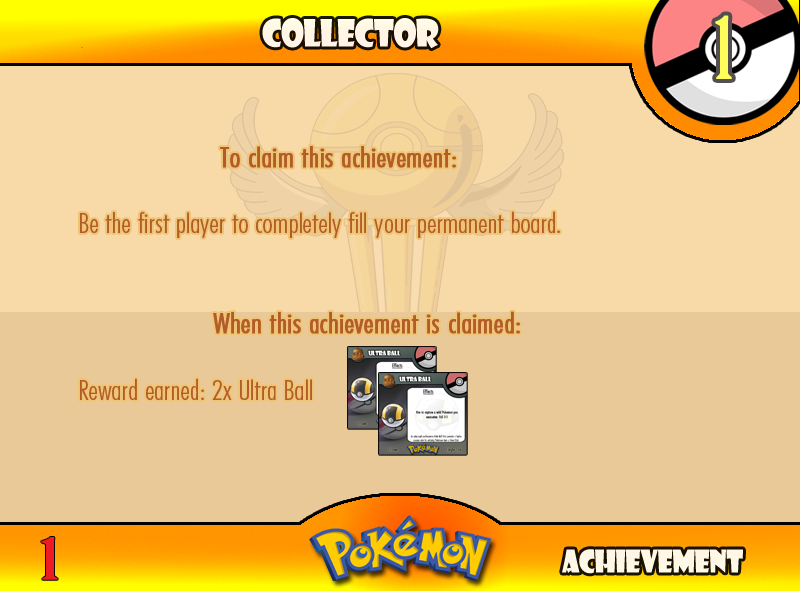
<style>
.page{position:relative;width:800px;height:591px;background:#e9c997}
.page>*{position:absolute;margin:0}
.t1{font:83.3px "BirchStd";letter-spacing:0.025em;color:#fffd59;font-weight:bold}
.t2{font:36.7px "ShowcardGothic-Reg";letter-spacing:-0.025em;color:#fff6e6;scale:0.91 1}
.t3{font:27.8px "FuturaCondensedBQ-Light";color:#b15c29;scale:1.08 1}
.t4{font:33.3px "FuturaCondensedBQ-Light";color:#b15c29;font-weight:bold;scale:1.08 1}
.t5{font:27.8px "FuturaCondensedBQ-Light";color:#b15c29;font-weight:bold;scale:1.08 1}
.t6{font:55.6px "BirchStd";color:#ed1c24;font-weight:bold;scale:1.5 1}
.t7{font:30.6px "ShowcardGothic-Reg";letter-spacing:-0.025em;color:#fff7e6;scale:0.91 1}
</style>
<div class="page">
<p class="t1" style="left:715px;top:15px;width:17px;height:64px">1</p>
<p class="t2" style="left:262px;top:18px;width:177px;height:31px">Collector</p>
<p class="t3" style="left:80px;top:146px;width:480px;height:254px"><span class="t4">          <br>      </span><span class="t5">To claim this achievement:<br><br> </span>Be the first player to completely fill your permanent board.<br><br><br>      <span class="t5">When this achievement is claimed:<br></span><br> Reward earned: 2x Ultra Ball</p>
<p class="t6" style="left:41px;top:537px;width:17px;height:43px">1</p>
<p class="t7" style="left:562px;top:549px;width:181px;height:25px">Achievement</p>
</div>
